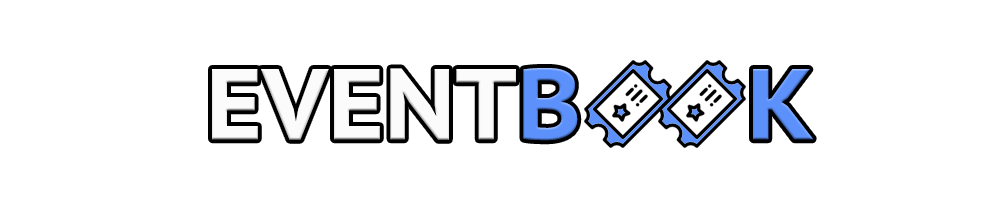
<style>
.page{position:relative;width:1000px;height:208px;background:#ffffff}
.page>*{position:absolute;margin:0}
.t1{font:100px "PTSans-CaptionBold";color:#5c91fc}
.t2{font:100px "PTSans-CaptionBold";color:#fbfbfb}
</style>
<div class="page">
<p class="t1" style="left:212px;top:68px;width:601px;height:73px"><span class="t2">EVENT</span>B      K</p>
</div>
